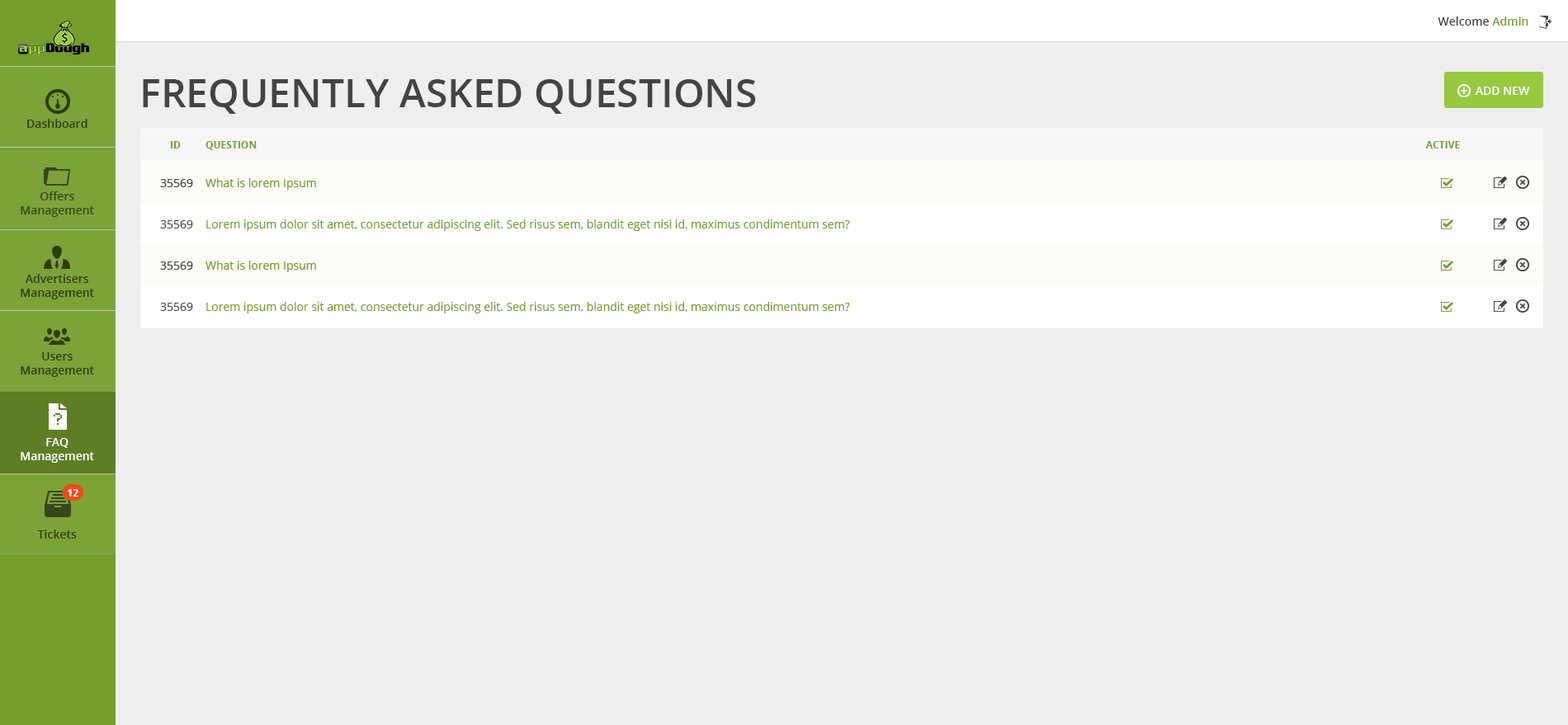
<style>
.page{position:relative;width:1568px;height:725px;background:#eeeeee}
.page>*{position:absolute;margin:0}
.t1{font:11.6px "OpenSans-Semibold";color:#444444}
.t2{font:11.6px "OpenSans-Semibold";color:#759e2d}
.t3{font:39.6px "OpenSans-Semibold";color:#444444;text-transform:uppercase}
.t4{font:11.6px "OpenSans-Semibold";color:#ffffff;text-transform:uppercase}
.t5{font:11.6px "OpenSans-Semibold";color:#2d3d0f}
.t6{font:9.9px "OpenSans-Bold";color:#759e2d;text-transform:uppercase}
.t7{font:11.6px "OpenSans-Semibold";color:#ffffff}
.t8{font:9.9px "OpenSans-Bold";color:#ffffff}
</style>
<div class="page">
<p class="t1" style="left:1438px;top:17px;width:90px;height:9px">Welcome <span class="t2">Admin</span></p>
<p class="t3" style="left:143px;top:79px;width:613px;height:35px">Frequently Asked Questions</p>
<p class="t4" style="left:1475px;top:87px;width:55px;height:8px">Add New</p>
<p class="t5" style="left:27px;top:119px;width:60px;height:9px">Dashboard</p>
<p class="t6" style="left:171px;top:141px;width:10px;height:8px">ID</p>
<p class="t6" style="left:205px;top:141px;width:52px;height:9px">Question</p>
<p class="t6" style="left:1425px;top:141px;width:35px;height:8px">Active</p>
<p class="t5" style="left:21px;top:191px;width:73px;height:26px;text-align:center">Offers Management</p>
<p class="t5" style="left:21px;top:274px;width:73px;height:26px;text-align:center">Advertisers Management</p>
<p class="t5" style="left:21px;top:352px;width:73px;height:25px;text-align:center">Users Management</p>
<p class="t7" style="left:21px;top:438px;width:73px;height:25px;text-align:center">FAQ Management</p>
<p class="t8" style="left:68px;top:489px;width:10px;height:8px">12</p>
<p class="t5" style="left:37px;top:530px;width:40px;height:9px">Tickets</p>
</div>
